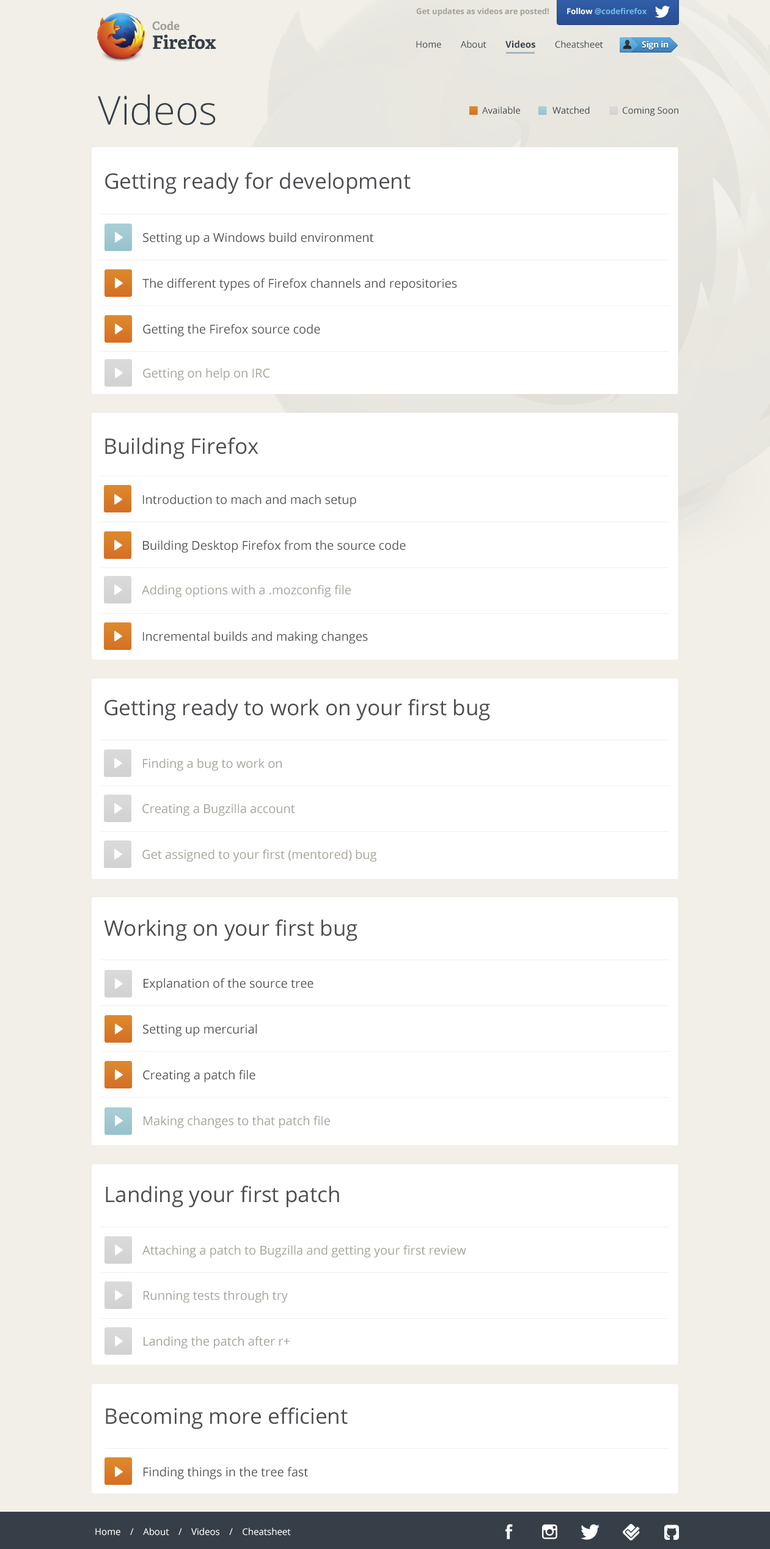
<style>
.page{position:relative;width:770px;height:1549px;background:#ffffff}
.page>*{position:absolute;margin:0}
.t1{font:7.9px "OpenSans-Bold";color:#a3a096}
.t2{font:7.9px "OpenSans-Bold";color:#71b9e6}
.t3{font:7.9px "OpenSans-Bold";color:#ffffff}
.t4{font:11.6px "AdelleBasic-Bold";color:#a3a096}
.t5{font:18.3px "AdelleBasic-Bold";color:#363f48}
.t6{font:9.2px "OpenSans";color:#363f48}
.t7{font:9.2px "OpenSans-Bold";color:#363f48}
.t8{font:39.7px "OpenSans-Light";color:#363f48}
.t9{font:21.4px "OpenSans";color:#4e4e52}
.t10{font:12.2px "OpenSans";color:#4e4e52}
.t11{font:12.2px "OpenSans";color:#a3a096}
.t12{font:9.2px "OpenSans";color:#ffffff}
</style>
<div class="page">
<p class="t1" style="left:416px;top:8px;width:133px;height:8px">Get updates as videos are posted!</p>
<p class="t2" style="left:567px;top:8px;width:79px;height:7px"><span class="t3">Follow</span> @codefirefox</p>
<p class="t4" style="left:152px;top:21px;width:28px;height:10px">Code</p>
<p class="t5" style="left:153px;top:34px;width:63px;height:15px">Firefox</p>
<p class="t6" style="left:416px;top:40px;width:187px;height:8px">Home        About        <span class="t7">Videos</span>        Cheatsheet</p>
<p class="t8" style="left:98px;top:94px;width:118px;height:31px">Videos</p>
<p class="t6" style="left:482px;top:106px;width:38px;height:8px">Available</p>
<p class="t6" style="left:552px;top:106px;width:38px;height:8px">Watched</p>
<p class="t6" style="left:622px;top:107px;width:56px;height:9px">Coming Soon</p>
<p class="t9" style="left:105px;top:172px;width:306px;height:22px">Getting ready for development</p>
<p class="t10" style="left:143px;top:232px;width:230px;height:13px">Setting up a Windows build environment</p>
<p class="t10" style="left:142px;top:278px;width:315px;height:13px">The different types of Firefox channels and repositories</p>
<p class="t10" style="left:143px;top:324px;width:177px;height:13px">Getting the Firefox source code</p>
<p class="t11" style="left:143px;top:368px;width:127px;height:13px">Getting on help on IRC</p>
<p class="t9" style="left:105px;top:437px;width:153px;height:22px">Building Firefox</p>
<p class="t10" style="left:143px;top:494px;width:213px;height:13px">Introduction to mach and mach setup</p>
<p class="t10" style="left:143px;top:540px;width:263px;height:13px">Building Desktop Firefox from the source code</p>
<p class="t11" style="left:142px;top:585px;width:209px;height:12px">Adding options with a .mozconfig file</p>
<p class="t10" style="left:143px;top:631px;width:225px;height:13px">Incremental builds and making changes</p>
<p class="t9" style="left:104px;top:699px;width:386px;height:22px">Getting ready to work on your first bug</p>
<p class="t11" style="left:143px;top:758px;width:139px;height:13px">Finding a bug to work on</p>
<p class="t11" style="left:142px;top:803px;width:153px;height:13px">Creating a Bugzilla account</p>
<p class="t11" style="left:142px;top:849px;width:234px;height:13px">Get assigned to your first (mentored) bug</p>
<p class="t9" style="left:104px;top:919px;width:253px;height:22px">Working on your first bug</p>
<p class="t10" style="left:144px;top:978px;width:169px;height:13px">Explanation of the source tree</p>
<p class="t10" style="left:143px;top:1024px;width:114px;height:13px">Setting up mercurial</p>
<p class="t10" style="left:143px;top:1070px;width:112px;height:12px">Creating a patch file</p>
<p class="t11" style="left:144px;top:1115px;width:186px;height:13px">Making changes to that patch file</p>
<p class="t9" style="left:106px;top:1186px;width:233px;height:22px">Landing your first patch</p>
<p class="t11" style="left:142px;top:1245px;width:324px;height:13px">Attaching a patch to Bugzilla and getting your first review</p>
<p class="t11" style="left:144px;top:1290px;width:144px;height:13px">Running tests through try</p>
<p class="t11" style="left:144px;top:1336px;width:146px;height:13px">Landing the patch after r+</p>
<p class="t9" style="left:106px;top:1407px;width:242px;height:22px">Becoming more efficient</p>
<p class="t10" style="left:144px;top:1467px;width:164px;height:13px">Finding things in the tree fast</p>
<p class="t12" style="left:95px;top:1528px;width:196px;height:8px">Home    /    About    /    Videos    /    Cheatsheet</p>
</div>
